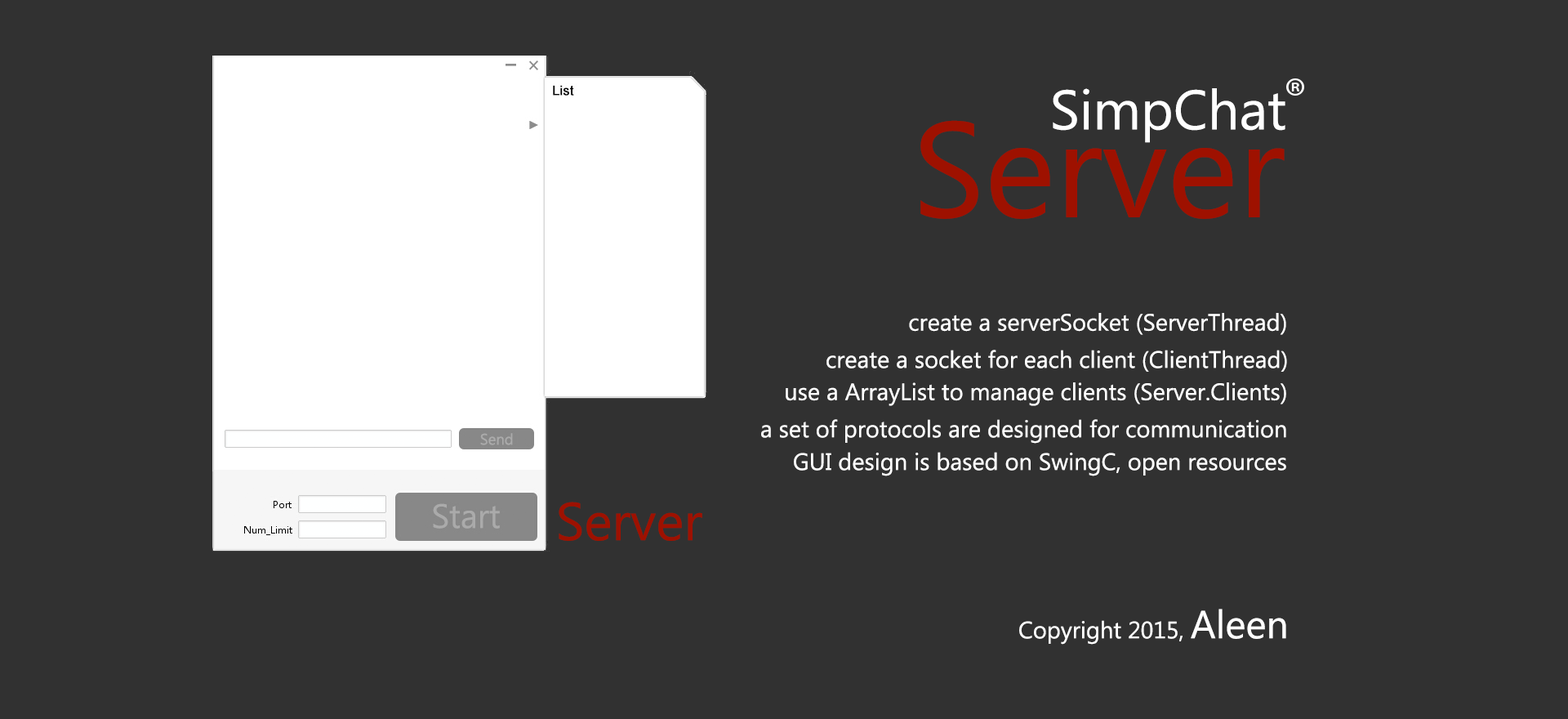
<style>
.page{position:relative;width:1568px;height:719px;background:#313131}
.page>*{position:absolute;margin:0}
.t1{font:55.5px "MicrosoftNewTaiLue";color:#ffffff}
.t2{font:135.3px "MicrosoftNewTaiLue";color:#9e1100}
.t3{font:23.6px "MicrosoftNewTaiLue";color:#ffffff}
.t4{font:53.2px "MicrosoftNewTaiLue";color:#9e1100}
.t5{font:39.2px "MicrosoftNewTaiLue";color:#ffffff}
</style>
<div class="page">
<p class="t1" style="left:1053px;top:88px;width:232px;height:55px">SimpChat</p>
<p class="t2" style="left:920px;top:120px;width:365px;height:99px">Server</p>
<p class="t3" style="left:909px;top:313px;width:377px;height:22px">create a serverSocket (ServerThread)</p>
<p class="t3" style="left:826px;top:350px;width:461px;height:22px">create a socket for each client (ClientThread)</p>
<p class="t3" style="left:786px;top:382px;width:500px;height:24px">use a ArrayList to manage clients (Server.Clients)</p>
<p class="t3" style="left:761px;top:419px;width:525px;height:24px">a set of protocols are designed for communication</p>
<p class="t3" style="left:794px;top:452px;width:492px;height:24px">GUI design is based on SwingC, open resources</p>
<p class="t4" style="left:559px;top:501px;width:143px;height:40px">Server</p>
<p class="t3" style="left:1019px;top:608px;width:267px;height:36px">Copyright 2015, <span class="t5">Aleen</span></p>
</div>
